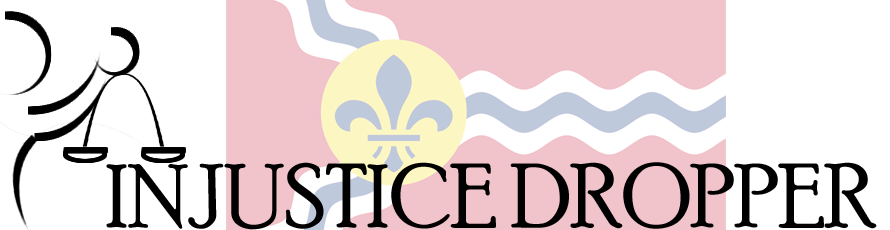
<style>
.page{position:relative;width:890px;height:230px;background:#ffffff}
.page>*{position:absolute;margin:0}
.t1{font:90px "PoorRichard-Regular";color:#000000}
</style>
<div class="page">
<p class="t1" style="left:106px;top:162px;width:771px;height:68px">INJUSTICE DROPPER</p>
</div>
